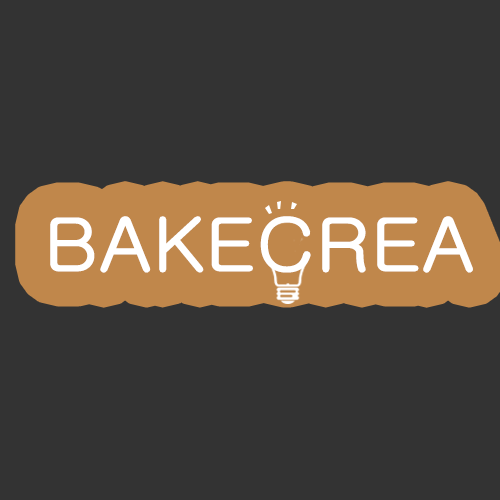
<style>
.page{position:relative;width:500px;height:500px;background:#333333}
.page>*{position:absolute;margin:0}
.t1{font:72px "Gulim";color:#ffffff;font-weight:bold;scale:1.1 1}
</style>
<div class="page">
<p class="t1" style="left:50px;top:216px;width:423px;height:57px">BAKECREA</p>
</div>
